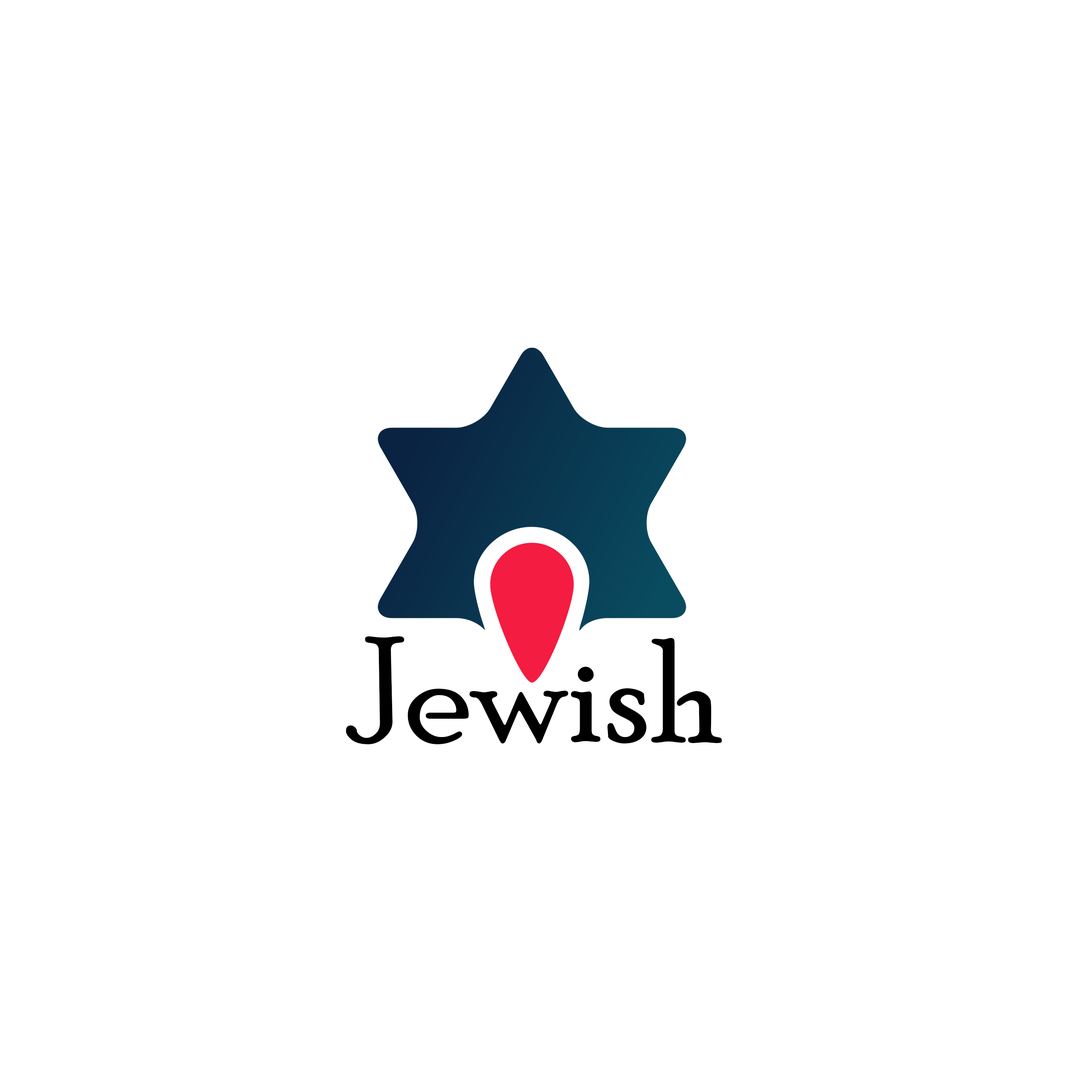
<style>
.page{position:relative;width:1092px;height:1092px;background:#ffffff}
.page>*{position:absolute;margin:0}
.t1{font:149.2px "PoorRichard-Regular";color:#000000}
</style>
<div class="page">
<p class="t1" style="left:346px;top:636px;width:376px;height:108px">Jewish</p>
</div>
